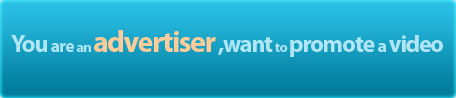
<style>
.page{position:relative;width:456px;height:98px}
.page>*{position:absolute;margin:0}
.t1{font:30px "MyriadPro-Bold";letter-spacing:-0.05em;color:#ffcc99}
.t2{font:24px "MyriadPro-Bold";letter-spacing:-0.05em;color:#b1e6f6}
.t3{font:18px "MyriadPro-Bold";letter-spacing:-0.05em;color:#b1e6f6}
.t4{font:14px "MyriadPro-Bold";letter-spacing:-0.05em;color:#b1e6f6}
</style>
<div class="page">
<p class="t1" style="left:11px;top:30px;width:432px;height:27px"><span class="t2">You </span><span class="t3">are </span><span class="t4">an </span>advertiser<span class="t2"> ,want </span><span class="t4">to </span><span class="t2">promote </span><span class="t3">a </span><span class="t2">video</span></p>
</div>
